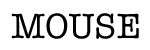
<style>
.page{position:relative;width:150px;height:50px;background:#ffffff}
.page>*{position:absolute;margin:0}
.t1{font:36px "AmericanTypewriter";color:#000000}
</style>
<div class="page">
<p class="t1" style="left:11px;top:13px;width:128px;height:26px">MOUSE</p>
</div>
